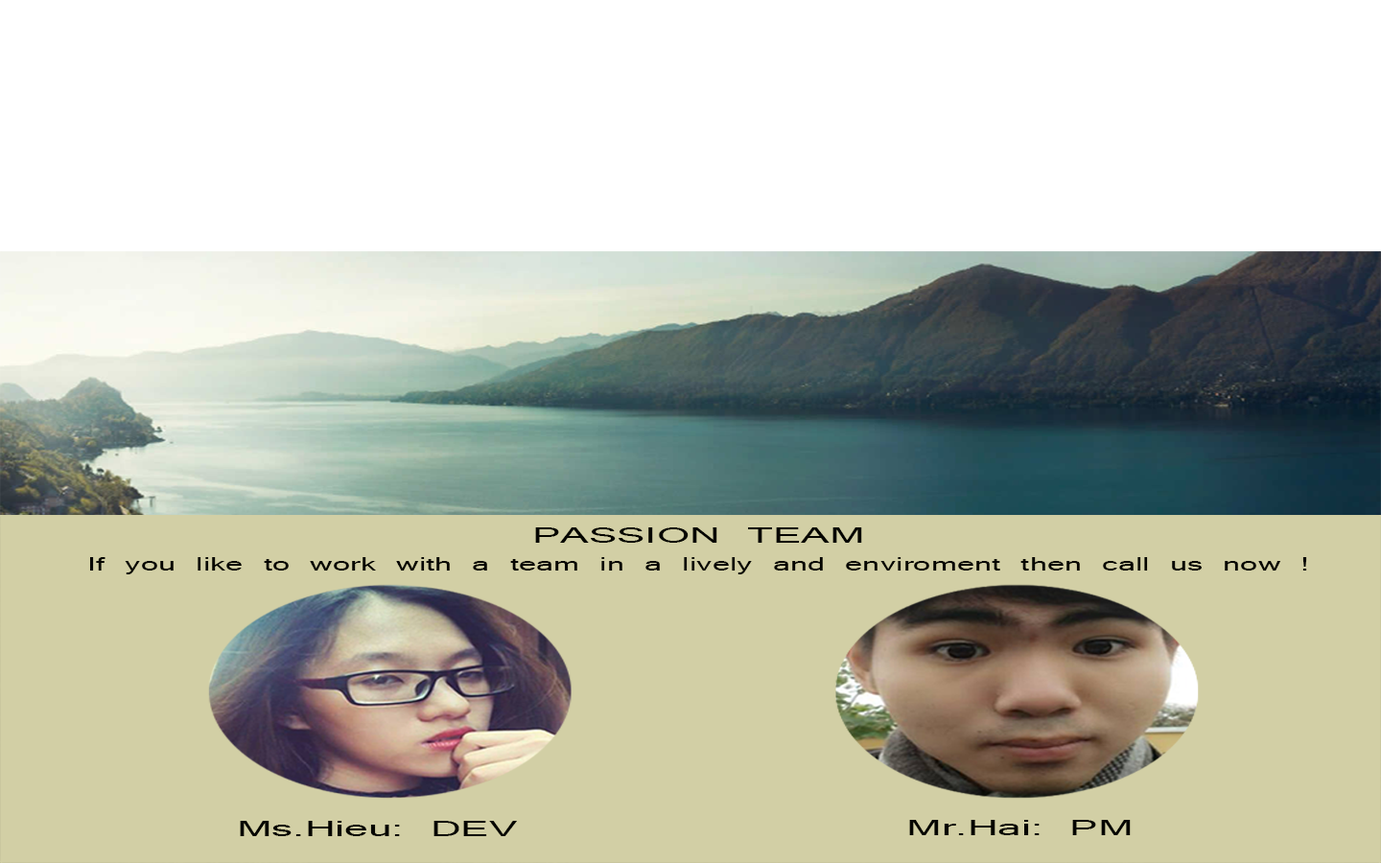
<style>
.page{position:relative;width:1381px;height:863px;background:#d2cfa5}
.page>*{position:absolute;margin:0}
.t1{font:24.3px "Latha";color:#050500;scale:1.93 1}
.t2{font:20.4px "Latha";color:#050500;scale:1.71 1}
.t3{font:24.1px "Latha";color:#050500;scale:1.94 1}
.t4{font:24.1px "Latha";color:#050500;scale:1.95 1}
</style>
<div class="page">
<p class="t1" style="left:535px;top:528px;width:327px;height:15px">PASSION TEAM</p>
<p class="t2" style="left:90px;top:557px;width:1217px;height:18px">If you like to work with a team in a lively and enviroment then call us now !</p>
<p class="t3" style="left:240px;top:821px;width:277px;height:15px">Ms.Hieu: DEV</p>
<p class="t4" style="left:909px;top:820px;width:222px;height:15px">Mr.Hai: PM</p>
</div>
